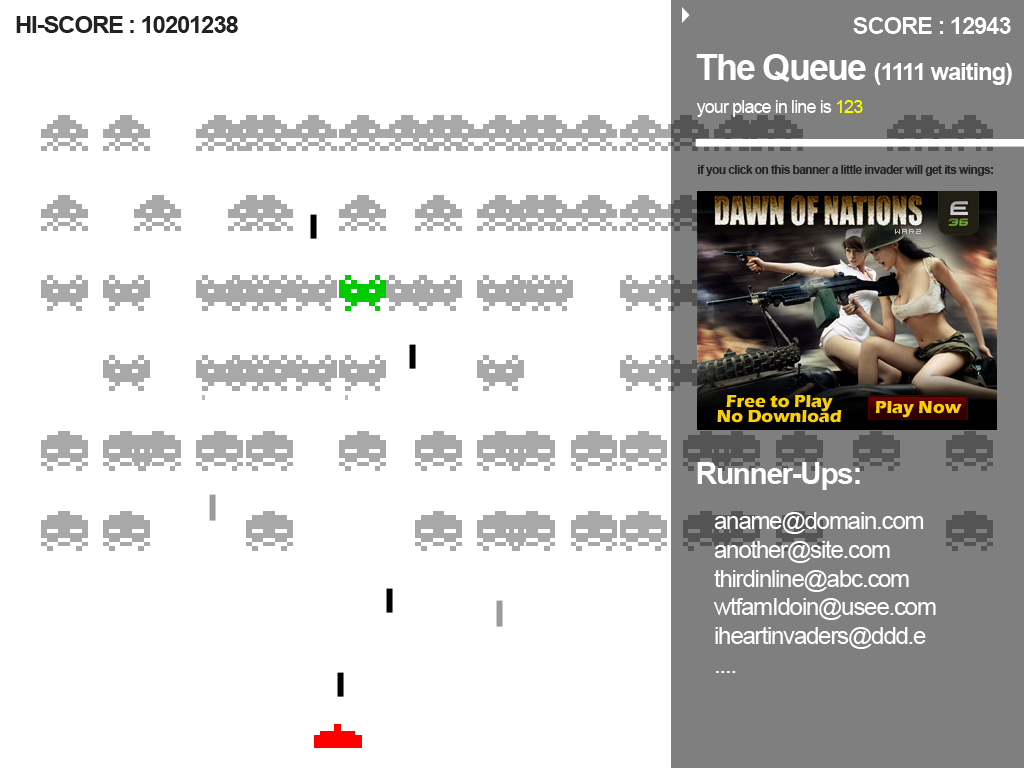
<style>
.page{position:relative;width:1024px;height:768px;background:#ffffff}
.page>*{position:absolute;margin:0}
.t1{font:24px "Arial-BoldMT";letter-spacing:-0.05em;color:#222222}
.t2{font:24px "Arial-BoldMT";letter-spacing:-0.05em;color:#ffffff}
.t3{font:36px "Arial-BoldMT";letter-spacing:-0.05em;color:#ffffff}
.t4{font:18px "ArialMT";letter-spacing:-0.05em;color:#ffffff}
.t5{font:18px "ArialMT";letter-spacing:-0.05em;color:#ffff00}
.t6{font:12px "Arial-BoldMT";letter-spacing:-0.05em;color:#222222}
.t7{font:30px "Arial-BoldMT";letter-spacing:-0.05em;color:#ffffff}
.t8{font:24px "ArialMT";letter-spacing:-0.05em;color:#ffffff}
</style>
<div class="page">
<p class="t1" style="left:16px;top:16px;width:222px;height:17px">HI-SCORE : 10201238</p>
<p class="t2" style="left:853px;top:17px;width:158px;height:17px">SCORE : 12943</p>
<p class="t2" style="left:853px;top:17px;width:158px;height:17px">SCORE : 12943</p>
<p class="t2" style="left:696px;top:54px;width:316px;height:31px"><span class="t3">The Queue </span>(1111 waiting)</p>
<p class="t4" style="left:696px;top:100px;width:167px;height:17px">your place in line is <span class="t5">123</span></p>
<p class="t6" style="left:698px;top:165px;width:295px;height:11px">if you click on this banner a little invader will get its wings:</p>
<p class="t7" style="left:697px;top:462px;width:163px;height:28px">Runner-Ups:</p>
<p class="t8" style="left:713px;top:512px;width:223px;height:161px">aname@domain.com<br>another@site.com<br>thirdinline@abc.com<br>wtfamIdoin@usee.com<br>iheartinvaders@ddd.e<br>....</p>
</div>
